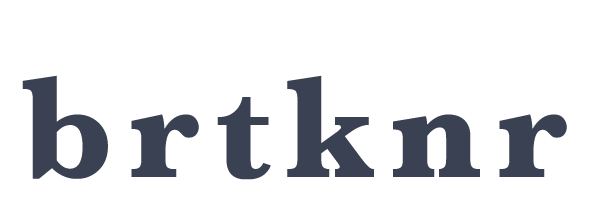
<style>
.page{position:relative;width:600px;height:200px;background:#ffffff}
.page>*{position:absolute;margin:0}
.t1{font:150px "Baskerville-Bold";letter-spacing:0.1em;color:#394153}
</style>
<div class="page">
<p class="t1" style="left:22px;top:75px;width:545px;height:105px">brtknr</p>
</div>
